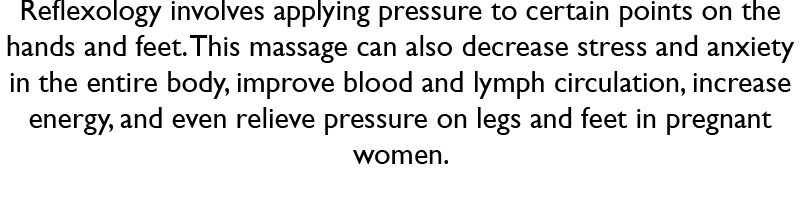
<style>
.page{position:relative;width:800px;height:200px;background:#ffffff}
.page>*{position:absolute;margin:0}
.t1{font:30px "GillSansMT";color:#050000}
</style>
<div class="page">
<p class="t1" style="left:7px;top:0px;width:787px;height:164px;text-align:center">Reflexology involves applying pressure to certain points on the hands and feet. This massage can also decrease stress and anxiety in the entire body, improve blood and lymph circulation, increase energy, and even relieve pressure on legs and feet in pregnant women.</p>
</div>
